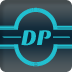
<style>
.page{position:relative;width:72px;height:72px}
.page>*{position:absolute;margin:0}
.t1{font:22px "SansitaOne";color:#21bfd0}
</style>
<div class="page">
<p class="t1" style="left:21px;top:30px;width:30px;height:16px">DP</p>
</div>
